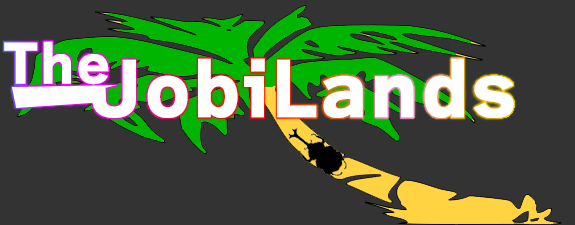
<style>
.page{position:relative;width:575px;height:225px;background:#333333}
.page>*{position:absolute;margin:0}
.t1{font:50px "WanpakuRuika-08";letter-spacing:0.029em;color:#ffffff}
.t2{font:70px "WanpakuRuika-08";letter-spacing:0.029em;color:#ffffff}
</style>
<div class="page">
<p class="t1" style="left:4px;top:41px;width:105px;height:44px">The</p>
<p class="t2" style="left:92px;top:58px;width:422px;height:60px">JobiLands</p>
</div>
